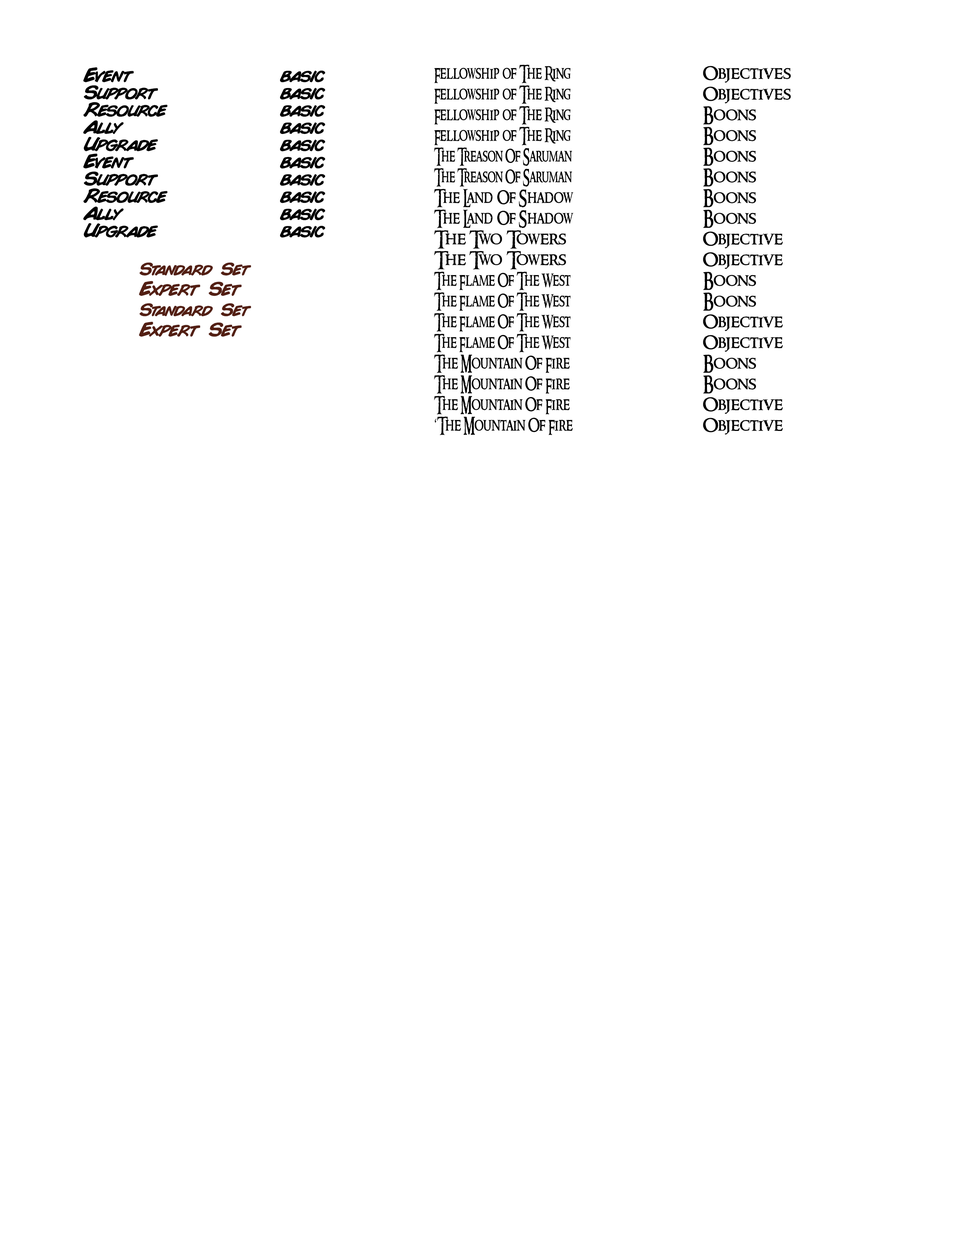
<style>
.page{position:relative;width:960px;height:1242px;background:#ffffff}
.page>*{position:absolute;margin:0}
.t1{font:17.3px "RingbearerMedium";color:#000000;scale:0.71 1}
.t2{font:17.3px "RingbearerMedium";color:#000000;scale:0.66 1}
.t3{font:17.3px "RingbearerMedium";color:#000000;scale:0.81 1}
.t4{font:17.3px "RingbearerMedium";color:#000000}
.t5{font:17.3px "RingbearerMedium";color:#000000;scale:0.75 1}
.t6{font:18.8px/17.3px "ComicBook-BoldItalic";color:#000000}
.t7{font:17.3px/20.4px "ComicBook-BoldItalic";color:#531f13}
.t8{font:18.8px/20.4px "ComicBook-BoldItalic";color:#531f13}
</style>
<div class="page">
<p class="t1" style="left:434px;top:65px;width:140px;height:370px">Fellowship of The Ring<br>Fellowship of The Ring<br>Fellowship of The Ring<br>Fellowship of The Ring<br><span class="t2">The Treason Of Saruman<br>The Treason Of Saruman<br></span><span class="t3">The Land Of Shadow<br>The Land Of Shadow<br></span><span class="t4">The Two Towers<br>The Two Towers<br></span>The Flame Of The West<br>The Flame Of The West<br>The Flame Of The West<br>The Flame Of The West<br><span class="t5">The Mountain Of Fire<br>The Mountain Of Fire<br>The Mountain Of Fire<br>‘The Mountain Of Fire</span></p>
<p class="t4" style="left:703px;top:66px;width:88px;height:369px">Objectives<br>Objectives<br>Boons<br>Boons<br>Boons<br>Boons<br>Boons<br>Boons<br>Objective<br>Objective<br>Boons<br>Boons<br>Objective<br>Objective<br>Boons<br>Boons<br>Objective<br>Objective</p>
<p class="t6" style="left:83px;top:67px;width:85px;height:171px">Event<br>Support<br>Resource<br>Ally<br>Upgrade<br>Event<br>Support<br>Resource<br>Ally<br>Upgrade</p>
<p class="t6" style="left:280px;top:70px;width:45px;height:168px">basic<br>basic<br>basic<br>basic<br>basic<br>basic<br>basic<br>basic<br>basic<br>basic</p>
<p class="t7" style="left:139px;top:262px;width:112px;height:75px">Standard Set<br><span class="t8">Expert Set<br></span>Standard Set<br><span class="t8">Expert Set</span></p>
</div>
